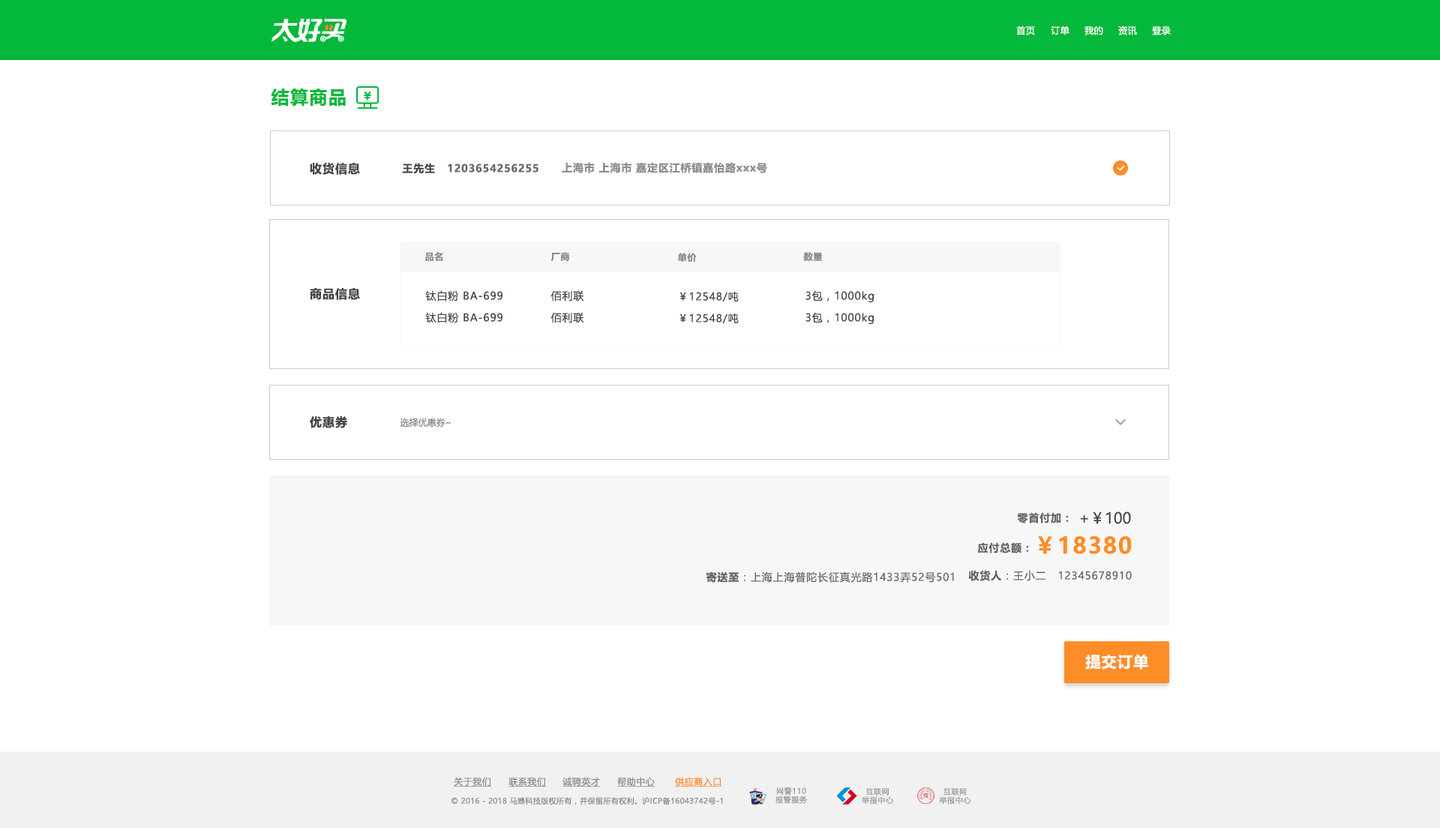
<style>
.page{position:relative;width:1440px;height:828px;background:#ffffff}
.page>*{position:absolute;margin:0}
.t1{font:9px "MicrosoftYaHeiUI";letter-spacing:0.04em;color:#ffffff}
.t2{font:18px "MicrosoftYaHeiUI-Bold";letter-spacing:0.06em;color:#04b83b}
.t3{font:12px "MicrosoftYaHeiUI-Bold";letter-spacing:0.06em;color:#444444}
.t4{font:10.5px "MicrosoftYaHeiUI-Bold";letter-spacing:0.06em;color:#444444}
.t5{font:10.5px "MicrosoftYaHeiUI-Bold";letter-spacing:0.06em;color:#666666}
.t6{font:10.5px "MicrosoftYaHeiUI-Bold";letter-spacing:0.06em;color:#8c8c8c}
.t7{font:9px "MicrosoftYaHeiUI-Bold";letter-spacing:0.06em;color:#8c8c8c}
.t8{font:10.5px "MicrosoftYaHeiUI";letter-spacing:0.06em;color:#444444}
.t9{font:9px "MicrosoftYaHeiUI";color:#888888}
.t10{font:15px "MicrosoftYaHeiUI";color:#444444}
.t11{font:22.4px "MicrosoftYaHeiUI-Bold";letter-spacing:0.06em;color:#ff8d27}
.t12{font:10.5px "MicrosoftYaHeiUI";letter-spacing:0.06em;color:#666666}
.t13{font:15px "MicrosoftYaHeiUI-Bold";letter-spacing:0.06em;color:#ffffff}
.t14{font:9px "MicrosoftYaHeiUI";letter-spacing:0.04em;color:#8c8c8c;text-decoration:underline}
.t15{font:9px "MicrosoftYaHeiUI";letter-spacing:0.04em;color:#ff8b25;text-decoration:underline}
.t16{font:7.5px "MicrosoftYaHeiUI";letter-spacing:0.04em;color:#8c8c8c}
.t17{font:7.5px/8.7px "MicrosoftYaHei";letter-spacing:0.06em;color:#999999}
</style>
<div class="page">
<p class="t1" style="left:1016px;top:26px;width:19px;height:9px">首页</p>
<p class="t1" style="left:1051px;top:26px;width:19px;height:9px">订单</p>
<p class="t1" style="left:1085px;top:26px;width:18px;height:9px">我的</p>
<p class="t1" style="left:1118px;top:26px;width:19px;height:9px">资讯</p>
<p class="t1" style="left:1152px;top:26px;width:19px;height:9px">登录</p>
<p class="t2" style="left:271px;top:89px;width:75px;height:18px">结算商品</p>
<p class="t3" style="left:310px;top:163px;width:50px;height:12px">收货信息</p>
<p class="t4" style="left:402px;top:163px;width:33px;height:11px">王先生</p>
<p class="t5" style="left:448px;top:164px;width:91px;height:9px">1203654256255</p>
<p class="t6" style="left:562px;top:162px;width:205px;height:11px">上海市 上海市 嘉定区江桥镇嘉怡路xxx号</p>
<p class="t7" style="left:425px;top:252px;width:18px;height:9px">品名</p>
<p class="t7" style="left:551px;top:252px;width:18px;height:10px">厂商</p>
<p class="t7" style="left:677px;top:253px;width:20px;height:10px">单价</p>
<p class="t7" style="left:803px;top:252px;width:20px;height:10px">数量</p>
<p class="t3" style="left:310px;top:288px;width:50px;height:12px">商品信息</p>
<p class="t8" style="left:425px;top:290px;width:78px;height:12px">钛白粉 BA-699</p>
<p class="t8" style="left:551px;top:290px;width:33px;height:12px">佰利联</p>
<p class="t8" style="left:680px;top:291px;width:59px;height:11px">￥12548/吨</p>
<p class="t8" style="left:806px;top:290px;width:68px;height:13px">3包，1000kg</p>
<p class="t8" style="left:425px;top:312px;width:78px;height:11px">钛白粉 BA-699</p>
<p class="t8" style="left:551px;top:312px;width:33px;height:11px">佰利联</p>
<p class="t8" style="left:680px;top:313px;width:59px;height:11px">￥12548/吨</p>
<p class="t8" style="left:806px;top:312px;width:68px;height:13px">3包，1000kg</p>
<p class="t3" style="left:310px;top:416px;width:37px;height:12px">优惠券</p>
<p class="t9" style="left:400px;top:418px;width:52px;height:10px">选择优惠券~</p>
<p class="t5" style="left:1017px;top:512px;width:52px;height:12px">零首付加：</p>
<p class="t10" style="left:1080px;top:512px;width:51px;height:12px">+￥100</p>
<p class="t5" style="left:977px;top:542px;width:52px;height:12px">应付总额：</p>
<p class="t11" style="left:1038px;top:536px;width:94px;height:18px">￥18380</p>
<p class="t12" style="left:706px;top:572px;width:248px;height:11px"><span class="t5">寄送至</span>：上海上海普陀长征真光路1433弄52号501</p>
<p class="t12" style="left:968px;top:570px;width:164px;height:11px"><span class="t5">收货人</span>：王小二   12345678910</p>
<p class="t13" style="left:1085px;top:654px;width:63px;height:16px">提交订单</p>
<p class="t14" style="left:454px;top:777px;width:38px;height:10px">关于我们</p>
<p class="t14" style="left:509px;top:777px;width:38px;height:10px">联系我们</p>
<p class="t14" style="left:563px;top:777px;width:38px;height:10px">诚聘英才</p>
<p class="t14" style="left:617px;top:777px;width:39px;height:10px">帮助中心</p>
<p class="t15" style="left:675px;top:777px;width:47px;height:10px">供应商入口</p>
<p class="t16" style="left:452px;top:797px;width:271px;height:8px">© 2016 - 2018 马蜂科技版权所有，并保留所有权利。沪ICP备16043742号-1</p>
<p class="t17" style="left:776px;top:787px;width:31px;height:17px;text-align:center">网警110<br>报警服务</p>
<p class="t17" style="left:862px;top:788px;width:31px;height:16px;text-align:center">互联网<br>举报中心</p>
<p class="t17" style="left:939px;top:788px;width:32px;height:16px;text-align:center">互联网<br>举报中心</p>
</div>
